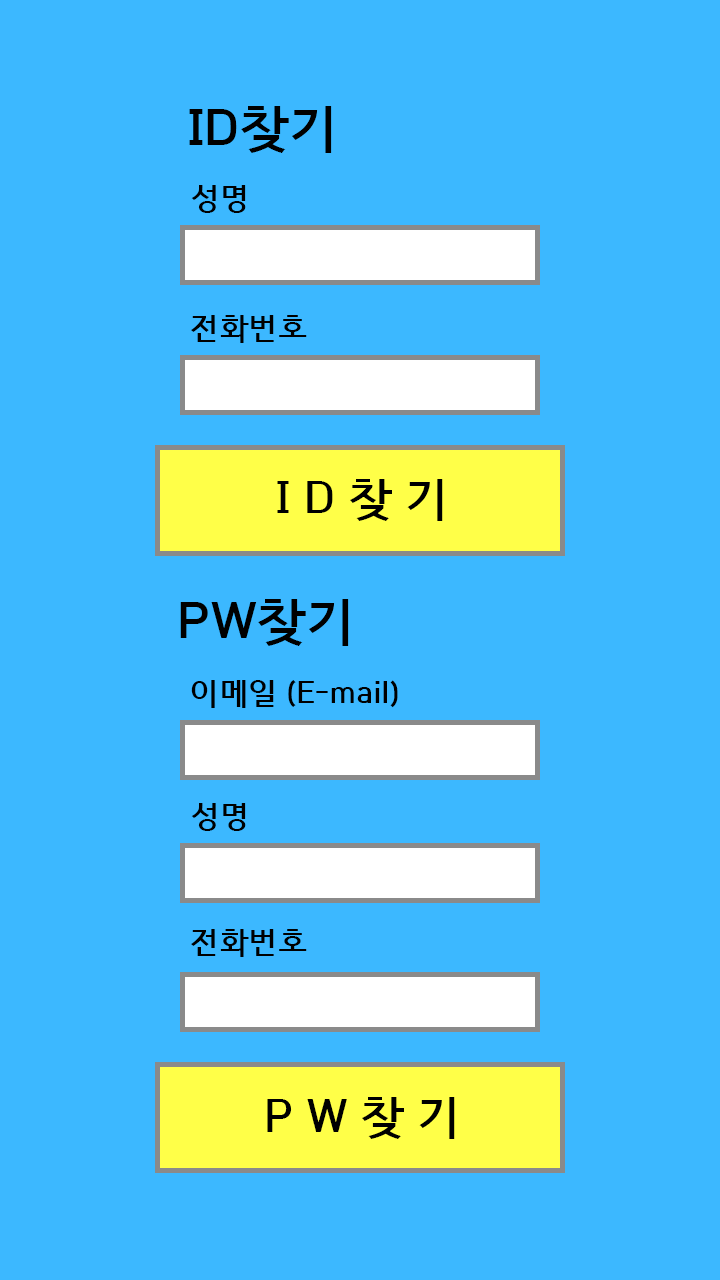
<style>
.page{position:relative;width:720px;height:1280px;background:#3cb8ff}
.page>*{position:absolute;margin:0}
.t1{font:50px "HCRDotum-Bold";color:#000000}
.t2{font:30px "HCRDotum-Bold";color:#000000}
.t3{font:45px "HCRDotum-Bold";color:#000000}
</style>
<div class="page">
<p class="t1" style="left:189px;top:106px;width:143px;height:47px">ID찾기</p>
<p class="t2" style="left:191px;top:185px;width:55px;height:28px">성명</p>
<p class="t2" style="left:191px;top:315px;width:116px;height:28px">전화번호</p>
<p class="t3" style="left:277px;top:479px;width:166px;height:42px">I D 찾 기</p>
<p class="t1" style="left:180px;top:599px;width:169px;height:47px">PW찾기</p>
<p class="t2" style="left:191px;top:680px;width:207px;height:28px">이메일 (E-mail)</p>
<p class="t2" style="left:191px;top:803px;width:55px;height:28px">성명</p>
<p class="t2" style="left:191px;top:929px;width:116px;height:28px">전화번호</p>
<p class="t3" style="left:267px;top:1097px;width:188px;height:42px">P W 찾 기</p>
</div>
